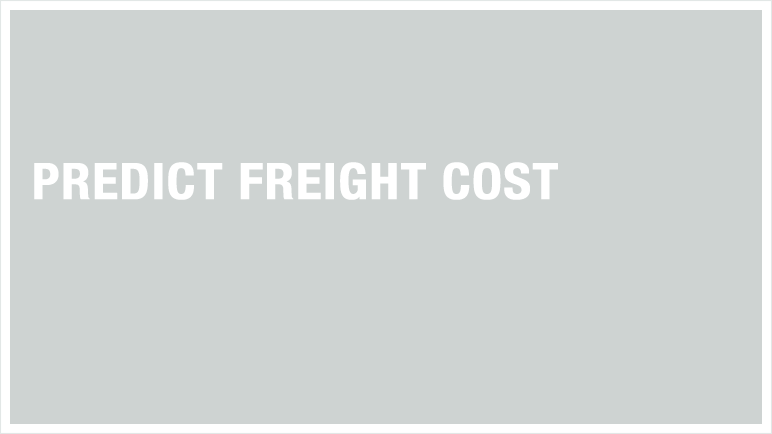
<style>
.page{position:relative;width:772px;height:434px;background:#ced3d2}
.page>*{position:absolute;margin:0}
.t1{font:50px "HelveticaNeue-CondensedBold";color:#ffffff;font-weight:bold;scale:1.07 1}
</style>
<div class="page">
<p class="t1" style="left:34px;top:162px;width:524px;height:38px">PREDICT FREIGHT COST</p>
</div>
